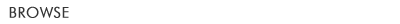
<style>
.page{position:relative;width:400px;height:24px;background:#ffffff}
.page>*{position:absolute;margin:0}
.t1{font:14.7px "FuturaBT-Light";letter-spacing:0.025em;color:#363636;text-transform:uppercase;font-weight:bold}
</style>
<div class="page">
<p class="t1" style="left:9px;top:6px;width:60px;height:12px">BROWSE</p>
</div>
